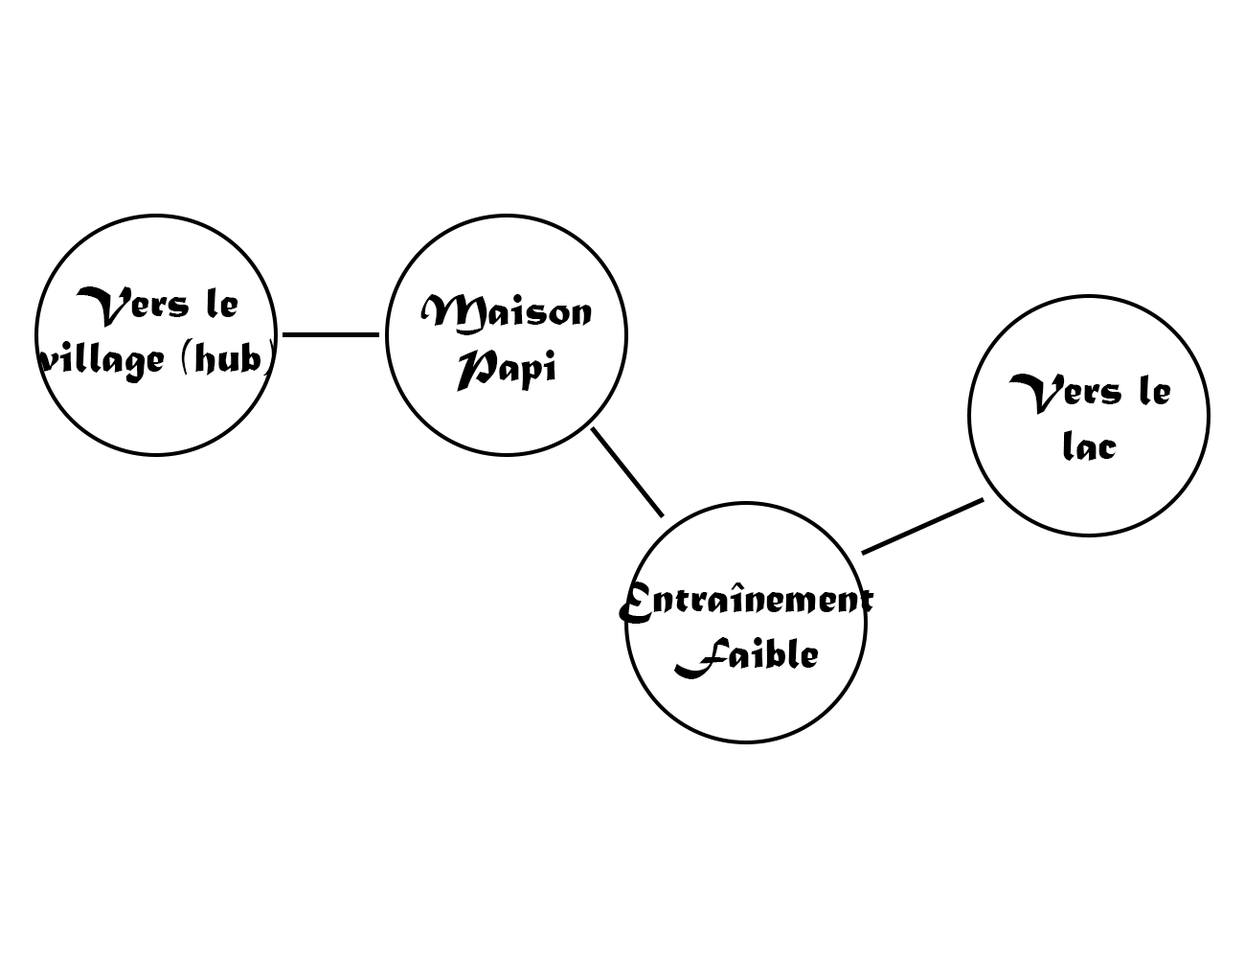
<style>
.page{position:relative;width:1245px;height:958px;background:#ffffff}
.page>*{position:absolute;margin:0}
.t1{font:46px "MaturaMTScriptCapitals";color:#000000}
</style>
<div class="page">
<p class="t1" style="left:38px;top:286px;width:237px;height:97px;text-align:center">Vers le<br>village (hub)</p>
<p class="t1" style="left:420px;top:294px;width:172px;height:98px;text-align:center">Maison<br>Papi</p>
<p class="t1" style="left:1008px;top:374px;width:163px;height:87px;text-align:center">Vers le<br>lac</p>
<p class="t1" style="left:619px;top:581px;width:255px;height:98px;text-align:center">Entraînement<br>Faible</p>
</div>
